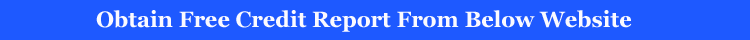
<style>
.page{position:relative;width:750px;height:40px;background:#1e59ff}
.page>*{position:absolute;margin:0}
.t1{font:22px "Georgia-Bold";color:#fbfaff}
</style>
<div class="page">
<p class="t1" style="left:96px;top:10px;width:536px;height:22px">Obtain Free Credit Report From Below Website</p>
</div>
